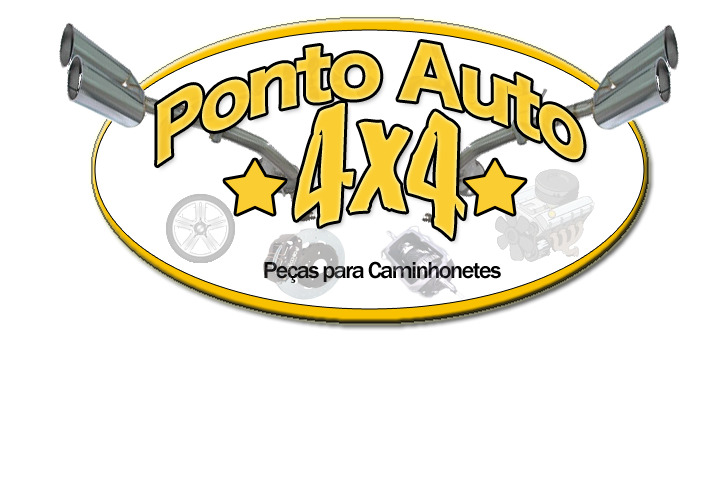
<style>
.page{position:relative;width:713px;height:500px;background:#ffffff}
.page>*{position:absolute;margin:0}
.t1{font:72px "HiraKakuStd-W8";letter-spacing:-0.06em;color:#face33}
.t2{font:180px "Cracked";letter-spacing:-0.06em;color:#face33}
.t3{font:24px "FranklinGothic-Medium";letter-spacing:-0.06em;color:#000000}
</style>
<div class="page">
<p class="t1" style="left:157px;top:42px;width:427px;height:124px;text-align:center">Ponto Auto</p>
<p class="t2" style="left:294px;top:103px;width:171px;height:136px">4x4</p>
<p class="t3" style="left:264px;top:261px;width:237px;height:22px">Peças para Caminhonetes</p>
</div>
